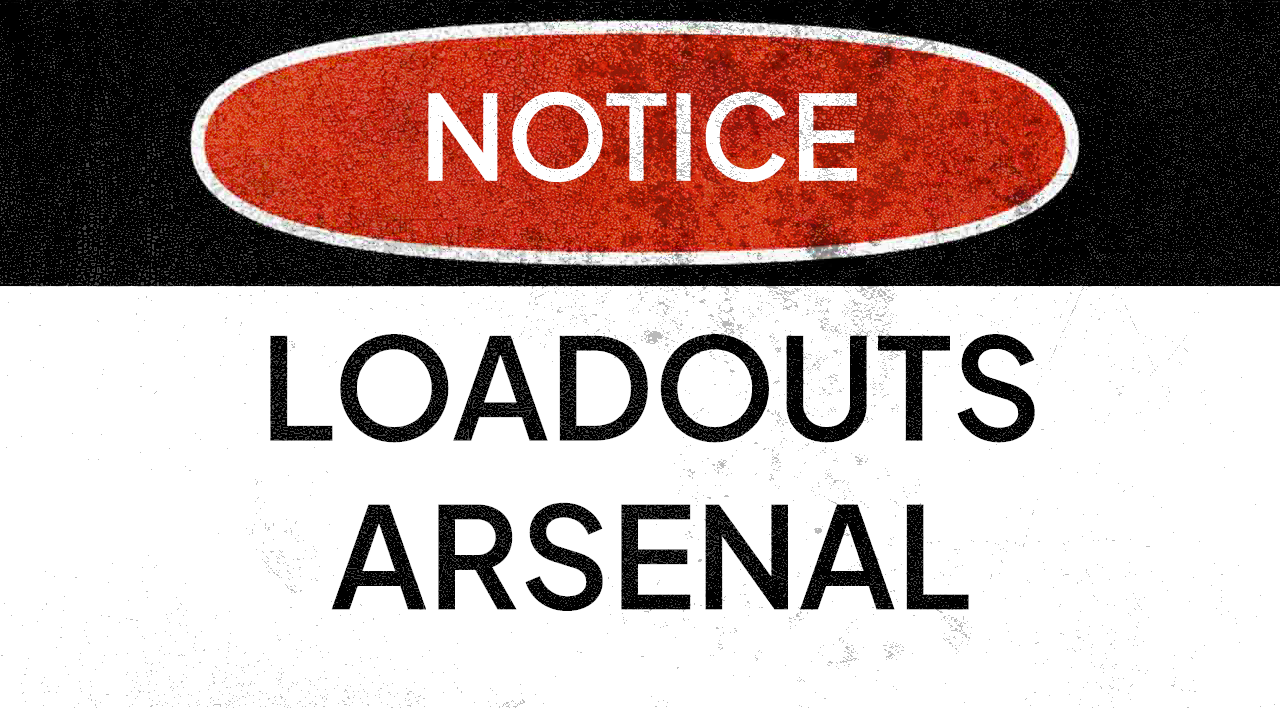
<style>
.page{position:relative;width:1280px;height:720px;background:#ffffff}
.page>*{position:absolute;margin:0}
.t1{font:117px "PlusJakartaSans-SemiBold";color:#ffffff}
.t2{font:140.6px "PlusJakartaSans-SemiBold";color:#000000}
</style>
<div class="page">
<p class="t1" style="left:428px;top:91px;width:429px;height:91px">NOTICE</p>
<p class="t2" style="left:270px;top:334px;width:765px;height:277px;text-align:center">LOADOUTS<br>ARSENAL</p>
</div>
